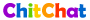
<style>
.page{position:relative;width:90px;height:20px;background:#ffffff}
.page>*{position:absolute;margin:0}
.t1{font:20.8px "BerlinSansFBDemi-Bold";color:#9900cc}
.t2{font:20.8px "BerlinSansFBDemi-Bold";color:#0066cc}
.t3{font:20.8px "BerlinSansFBDemi-Bold";color:#66cc00}
.t4{font:20.8px "BerlinSansFBDemi-Bold";color:#ffcc00}
.t5{font:20.8px "BerlinSansFBDemi-Bold";color:#ff9900}
.t6{font:20.8px "BerlinSansFBDemi-Bold";color:#ff3300}
</style>
<div class="page">
<p class="t1" style="left:3px;top:3px;width:83px;height:15px">C<span class="t2">h</span><span class="t3">i</span><span class="t4">t</span><span class="t5">C</span><span class="t6">h</span>a<span class="t2">t</span></p>
</div>
